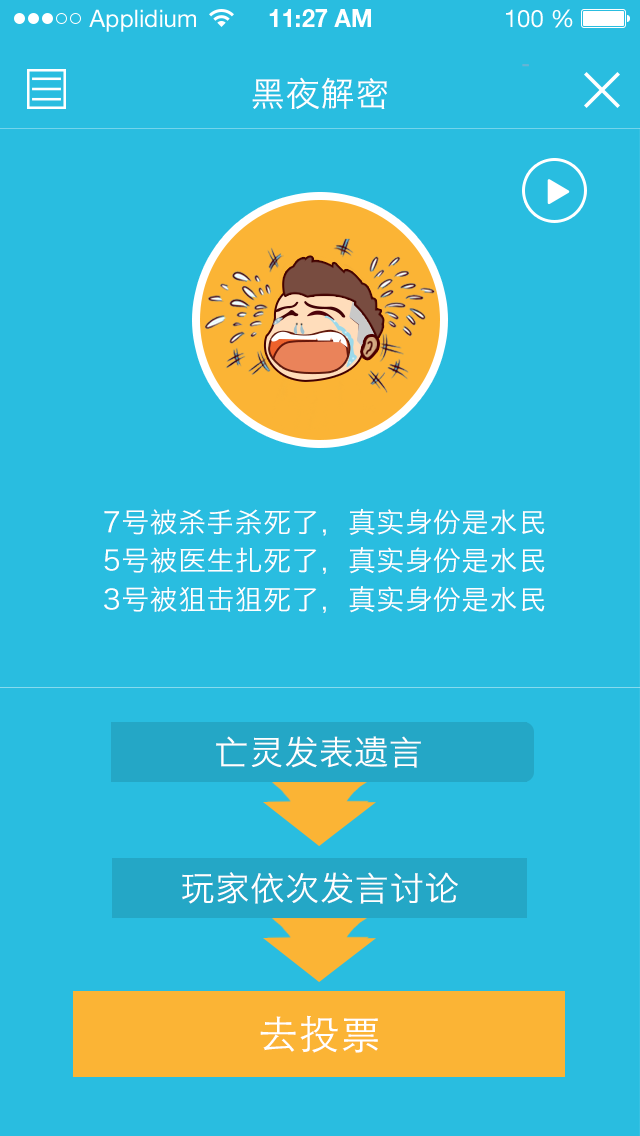
<style>
.page{position:relative;width:640px;height:1136px;background:#29bde0}
.page>*{position:absolute;margin:0}
.t1{font:34px "HiraginoSansGB-W3";letter-spacing:0.025em;color:#ffffff}
.t2{font:27.6px "HiraginoSansGB-W3";letter-spacing:0.025em;color:#ffffff}
.t3{font:40px "STHeitiSC-Light";letter-spacing:0.025em;color:#ffffff}
</style>
<div class="page">
<p class="t1" style="left:252px;top:77px;width:135px;height:32px">黑夜解密</p>
<p class="t2" style="left:104px;top:508px;width:441px;height:28px">7号被杀手杀死了，真实身份是水民</p>
<p class="t2" style="left:104px;top:547px;width:441px;height:27px">5号被医生扎死了，真实身份是水民</p>
<p class="t2" style="left:104px;top:586px;width:441px;height:27px">3号被狙击狙死了，真实身份是水民</p>
<p class="t1" style="left:216px;top:736px;width:205px;height:32px">亡灵发表遗言</p>
<p class="t1" style="left:182px;top:872px;width:276px;height:32px">玩家依次发言讨论</p>
<p class="t3" style="left:260px;top:1015px;width:118px;height:38px">去投票</p>
</div>
